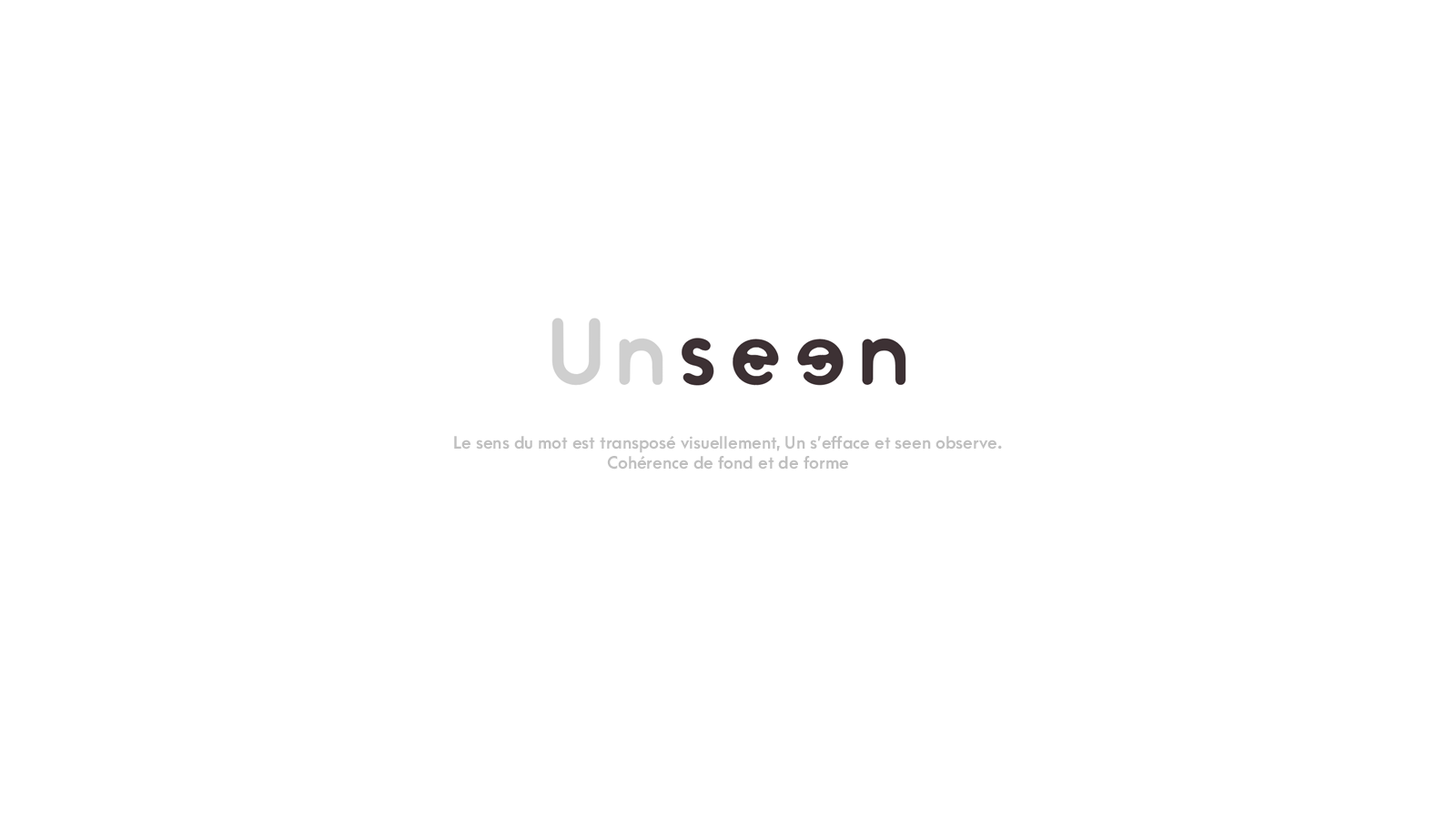
<style>
.page{position:relative;width:1456px;height:819px;background:#ffffff}
.page>*{position:absolute;margin:0}
.t1{font:16.4px/20px "ArcaMajora3-Bold"}
.t2{font:72.8px/32.8px "ArcaMajora3-Heavy"}
.t3{font:16.4px/32.8px "ArcaMajora3-Bold"}
</style>
<div class="page">
<p class="t1" style="left:454px;top:324px;width:548px;height:146px;text-align:center"><span class="t2">Unseen<br><br></span><span class="t3">Le sens</span> du mot est transposé visuellement, Un s’efface et seen observe.<br>Cohérence de fond et de forme</p>
</div>
